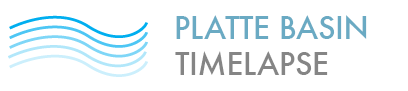
<style>
.page{position:relative;width:408px;height:91px;background:#ffffff}
.page>*{position:absolute;margin:0}
.t1{font:30px "Futura-Medium";letter-spacing:-0.01em;color:#6aaac3}
.t2{font:30px "Futura-Medium";letter-spacing:-0.01em;color:#858585}
</style>
<div class="page">
<p class="t1" style="left:176px;top:15px;width:191px;height:24px">PLATTE BASIN</p>
<p class="t2" style="left:175px;top:51px;width:153px;height:24px">TIMELAPSE</p>
</div>
